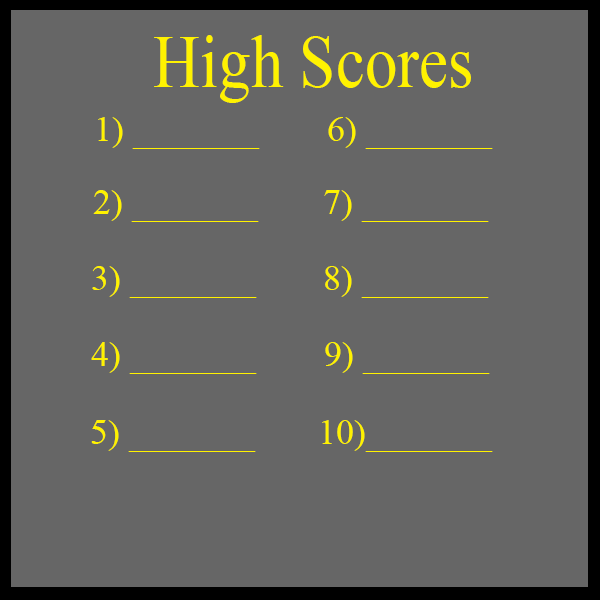
<style>
.page{position:relative;width:600px;height:600px;background:#666666}
.page>*{position:absolute;margin:0}
.t1{font:74.9px "TimesNewRomanPSMT";color:#fff200;scale:0.87 1}
.t2{font:36px "TimesNewRomanPSMT";color:#fff200}
</style>
<div class="page">
<p class="t1" style="left:154px;top:35px;width:317px;height:68px">High Scores</p>
<p class="t2" style="left:98px;top:117px;width:162px;height:32px">1) _______</p>
<p class="t2" style="left:328px;top:117px;width:165px;height:32px">6) _______</p>
<p class="t2" style="left:93px;top:190px;width:166px;height:32px">2) _______</p>
<p class="t2" style="left:324px;top:190px;width:165px;height:32px">7) _______</p>
<p class="t2" style="left:92px;top:266px;width:165px;height:32px">3) _______</p>
<p class="t2" style="left:325px;top:266px;width:164px;height:32px">8) _______</p>
<p class="t2" style="left:91px;top:342px;width:166px;height:32px">4) _______</p>
<p class="t2" style="left:325px;top:342px;width:165px;height:32px">9) _______</p>
<p class="t2" style="left:91px;top:420px;width:165px;height:32px">5) _______</p>
<p class="t2" style="left:322px;top:420px;width:171px;height:32px">10)_______</p>
</div>
